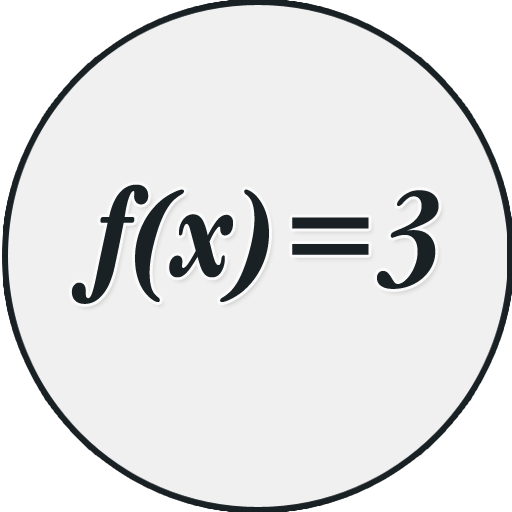
<style>
.page{position:relative;width:512px;height:512px;background:#f0f0f0}
.page>*{position:absolute;margin:0}
.t1{font:130.2px "AppleGaramond-BoldItalic";color:#1a1b19}
</style>
<div class="page">
<p class="t1" style="left:71px;top:184px;width:368px;height:120px">f(x)=3</p>
</div>
